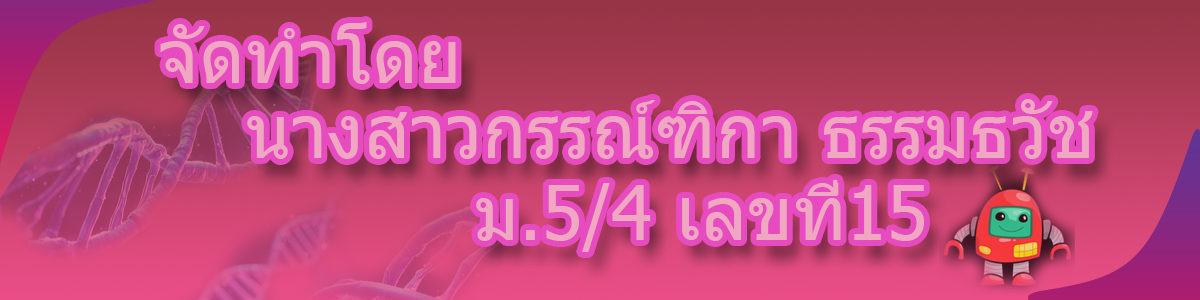
<style>
.page{position:relative;width:1200px;height:300px}
.page>*{position:absolute;margin:0}
.t1{font:75px "Tahoma";color:#f0a8c2}
</style>
<div class="page">
<p class="t1" style="left:160px;top:22px;width:296px;height:62px">จัดทำโดย</p>
<p class="t1" style="left:247px;top:99px;width:846px;height:60px">นางสาวกรรณ์ฑิกา ธรรมธวัช</p>
<p class="t1" style="left:476px;top:180px;width:448px;height:72px">ม.5/4 เลขที่15</p>
</div>
